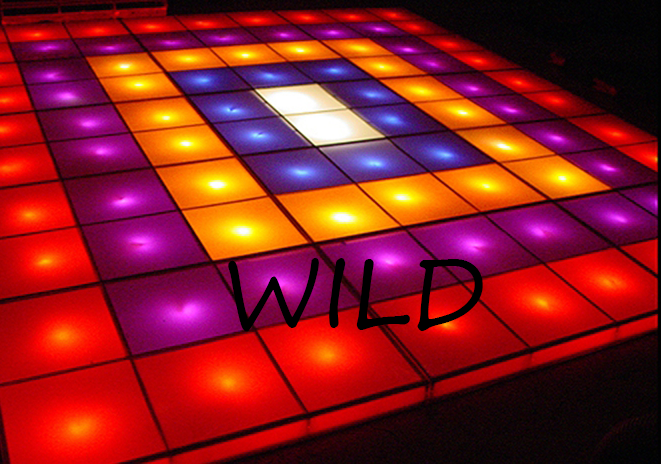
<style>
.page{position:relative;width:661px;height:464px}
.page>*{position:absolute;margin:0}
.t1{font:96px "SegoePrint";color:#000000}
</style>
<div class="page">
<p class="t1" style="left:228px;top:258px;width:255px;height:74px">WILD</p>
</div>
